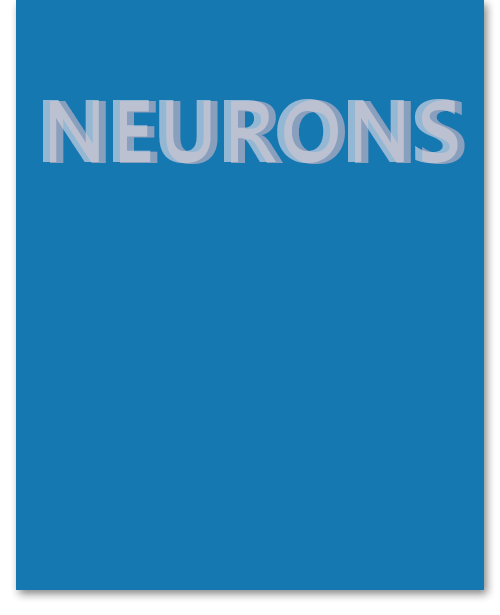
<style>
.page{position:relative;width:500px;height:615px;background:#1678b1}
.page>*{position:absolute;margin:0}
.t1{font:88.4px "SegoeWP-Bold"}
</style>
<div class="page">
<p class="t1" style="left:43px;top:99px;width:415px;height:64px">NEURONS</p>
<p class="t1" style="left:50px;top:100px;width:415px;height:64px">NEURONS</p>
</div>
